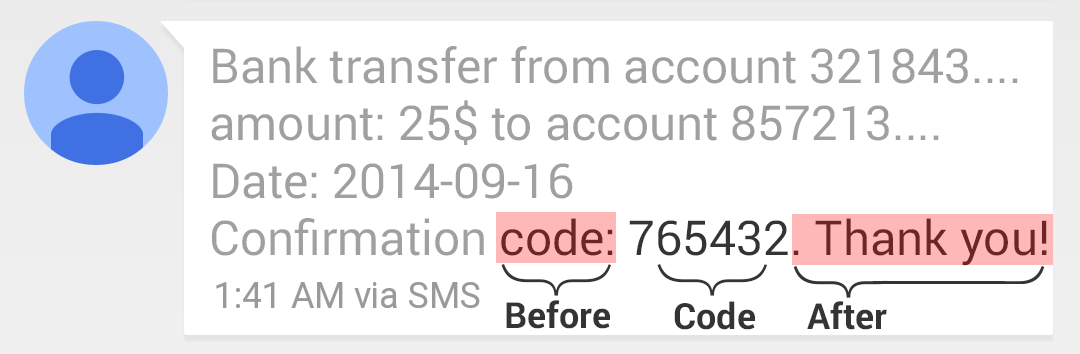
<style>
.page{position:relative;width:1080px;height:354px;background:#ffffff}
.page>*{position:absolute;margin:0}
.t1{font:48px "Roboto-Regular";color:#a0a0a0}
.t2{font:110px "Roboto-Thin";color:#343434}
.t3{font:36px "Roboto-Bold";color:#343434}
</style>
<div class="page">
<p class="t1" style="left:211px;top:46px;width:836px;height:220px">Bank transfer from account 321843.... amount: 25$ to account 857213....<br>Date: 2014-09-16<br>Confirmation code: 765432. Thank you!</p>
<p class="t2" style="left:501px;top:264px;width:111px;height:32px;rotate:90deg">}</p>
<p class="t2" style="left:657px;top:264px;width:111px;height:32px;rotate:90deg">}</p>
<p class="t3" style="left:506px;top:300px;width:104px;height:29px">Before</p>
<p class="t3" style="left:674px;top:301px;width:81px;height:29px">Code</p>
<p class="t3" style="left:807px;top:301px;width:80px;height:29px">After</p>
</div>
